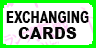
<style>
.page{position:relative;width:96px;height:48px;background:#ffffff}
.page>*{position:absolute;margin:0}
.t1{font:16.2px "Arial-Black";color:#050505;scale:0.67 1}
.t2{font:16.2px "Arial-Black";color:#050505;scale:0.95 1}
</style>
<div class="page">
<p class="t1" style="left:6px;top:11px;width:83px;height:12px">EXCHANGING</p>
<p class="t2" style="left:18px;top:27px;width:59px;height:12px">CARDS</p>
</div>
